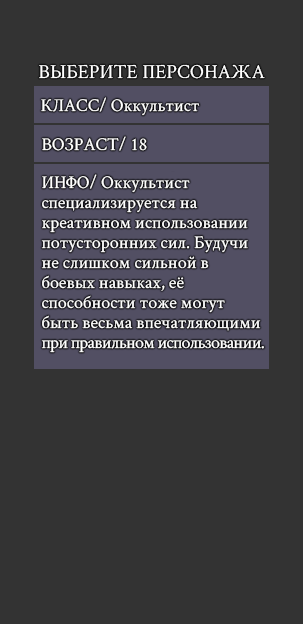
<style>
.page{position:relative;width:303px;height:624px;background:#333333}
.page>*{position:absolute;margin:0}
.t1{font:20px "CrimsonText-Regular";color:#ffffff}
.t2{font:18px "CrimsonText-Regular";color:#ffffff}
.t3{font:18px/20px "CrimsonText-Regular";color:#ffffff}
.t4{font:18px/20px "CrimsonText-Regular";letter-spacing:-0.04em;color:#ffffff}
</style>
<div class="page">
<p class="t1" style="left:39px;top:64px;width:226px;height:15px">ВЫБЕРИТЕ ПЕРСОНАЖА</p>
<p class="t2" style="left:41px;top:97px;width:159px;height:19px">КЛАСС/ Оккультист</p>
<p class="t2" style="left:42px;top:136px;width:105px;height:15px">ВОЗРАСТ/ 18</p>
<p class="t3" style="left:41px;top:174px;width:223px;height:179px">ИНФО/ Оккультист<br>специализируется на<br>креативном использовании<br>потусторонних сил. Будучи<br>не слишком сильной в<br>боевых навыках, её<br>способности тоже могут<br>быть весьма впечатляющими<br><span class="t4">при правильном использовании.</span></p>
</div>
